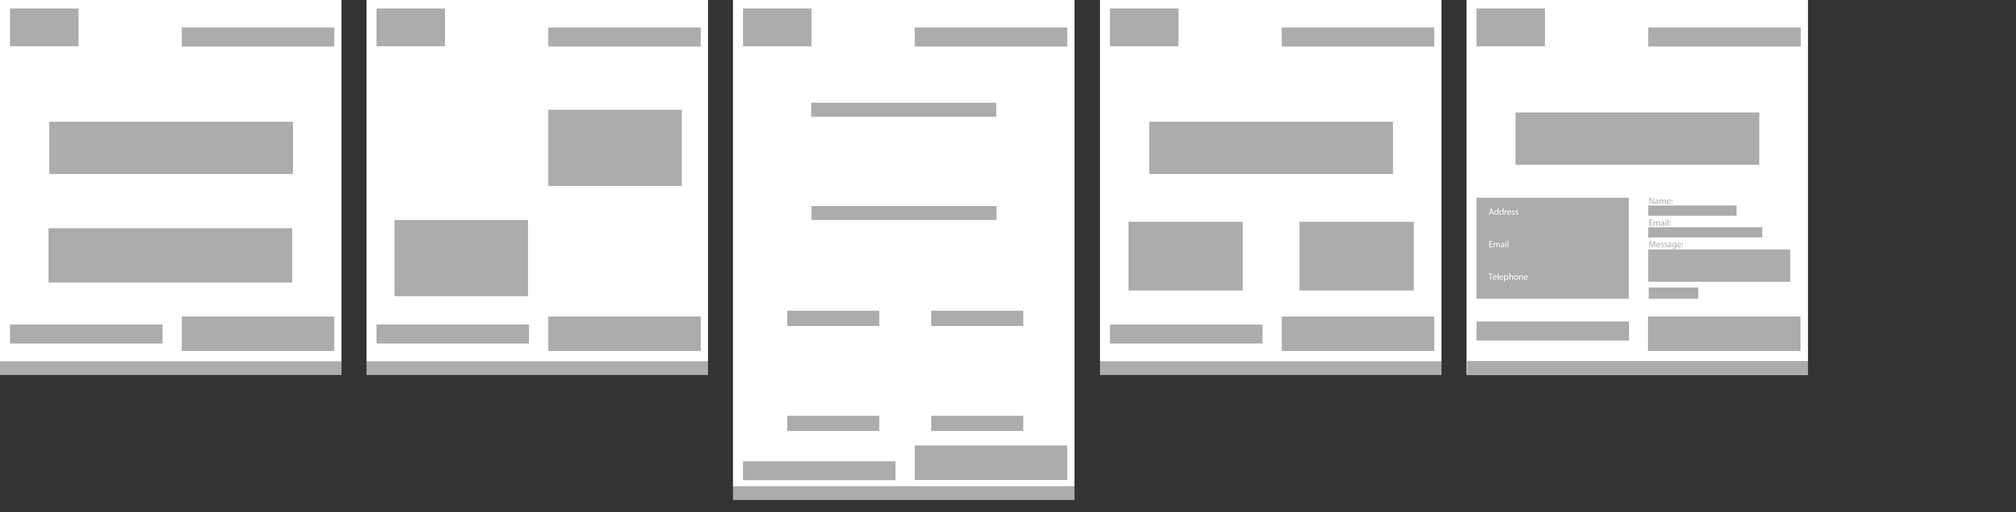
<style>
.page{position:relative;width:2016px;height:512px;background:#ffffff}
.page>*{position:absolute;margin:0}
.t1{font:9px "MyriadPro-Regular";color:#ffffff}
</style>
<div class="page">
<p class="t1" style="left:1488px;top:208px;width:40px;height:74px">Address<br><br><br>Email<br><br><br>Telephone</p>
</div>
